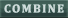
<style>
.page{position:relative;width:68px;height:18px}
.page>*{position:absolute;margin:0}
.t1{font:11.9px "Cambria-Bold";letter-spacing:0.115em;color:#d0dbda}
</style>
<div class="page">
<p class="t1" style="left:4px;top:4px;width:60px;height:9px">COMBINE</p>
</div>
